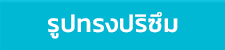
<style>
.page{position:relative;width:225px;height:50px;background:#00b8d4}
.page>*{position:absolute;margin:0}
.t1{font:25px "Kanit-Medium";letter-spacing:0.01em;color:#ffffff;text-transform:uppercase}
</style>
<div class="page">
<p class="t1" style="left:48px;top:12px;width:130px;height:27px">รูปทรงปริซึม</p>
</div>
